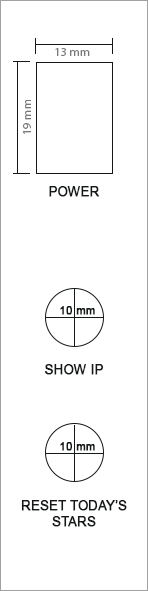
<style>
.page{position:relative;width:148px;height:591px;background:#ffffff}
.page>*{position:absolute;margin:0}
.t1{font:12.3px "MyriadPro-Regular";color:#787878}
.t2{font:13px "ArialMT";color:#141817;font-weight:bold}
.t3{font:11.2px "ArialMT";color:#141817;font-weight:bold}
.t4{font:13px/16px "ArialMT";color:#141817;text-transform:uppercase;font-weight:bold}
</style>
<div class="page">
<p class="t1" style="left:55px;top:48px;width:35px;height:8px">13 mm</p>
<p class="t1" style="left:23px;top:100px;width:8px;height:34px;rotate:-90deg">19 mm</p>
<p class="t2" style="left:49px;top:186px;width:50px;height:11px">POWER</p>
<p class="t3" style="left:60px;top:306px;width:35px;height:9px">10 mm</p>
<p class="t2" style="left:45px;top:364px;width:59px;height:11px">SHOW IP</p>
<p class="t3" style="left:60px;top:442px;width:35px;height:9px">10 mm</p>
<p class="t4" style="left:21px;top:500px;width:106px;height:27px;text-align:center">RESET TODAY’S<br>STARS</p>
</div>
